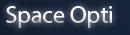
<style>
.page{position:relative;width:130px;height:35px}
.page>*{position:absolute;margin:0}
.t1{font:24px "MyriadPro-Regular";color:#ffffff}
</style>
<div class="page">
<p class="t1" style="left:6px;top:6px;width:106px;height:22px">Space Opti</p>
</div>
